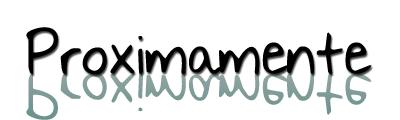
<style>
.page{position:relative;width:400px;height:120px;background:#ffffff}
.page>*{position:absolute;margin:0}
.t1{font:48px "NothingYouCouldSay";color:#000000}
.t2{font:48px "NothingYouCouldSay";color:#809c99}
</style>
<div class="page">
<p class="t1" style="left:26px;top:27px;width:346px;height:48px">Proximamente</p>
<p class="t2" style="left:26px;top:72px;width:346px;height:48px">Proximamente</p>
</div>
